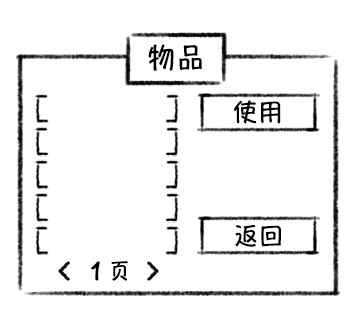
<style>
.page{position:relative;width:360px;height:319px;background:#ffffff}
.page>*{position:absolute;margin:0}
.t1{font:28px "HannotateSC-W7";letter-spacing:0.055em;color:#000000}
.t2{font:12px/1125.5px "HannotateSC-W7";letter-spacing:0.055em;color:#000000}
.t3{font:24px "HannotateSC-W7";letter-spacing:0.055em;color:#000000}
</style>
<div class="page">
<p class="t1" style="left:148px;top:44px;width:54px;height:27px">物品</p>
<p class="t2" style="left:234px;top:100px;width:47px;height:24px">使用</p>
<p class="t3" style="left:235px;top:225px;width:46px;height:22px">返回</p>
<p class="t1" style="left:91px;top:261px;width:9px;height:20px">1</p>
</div>
